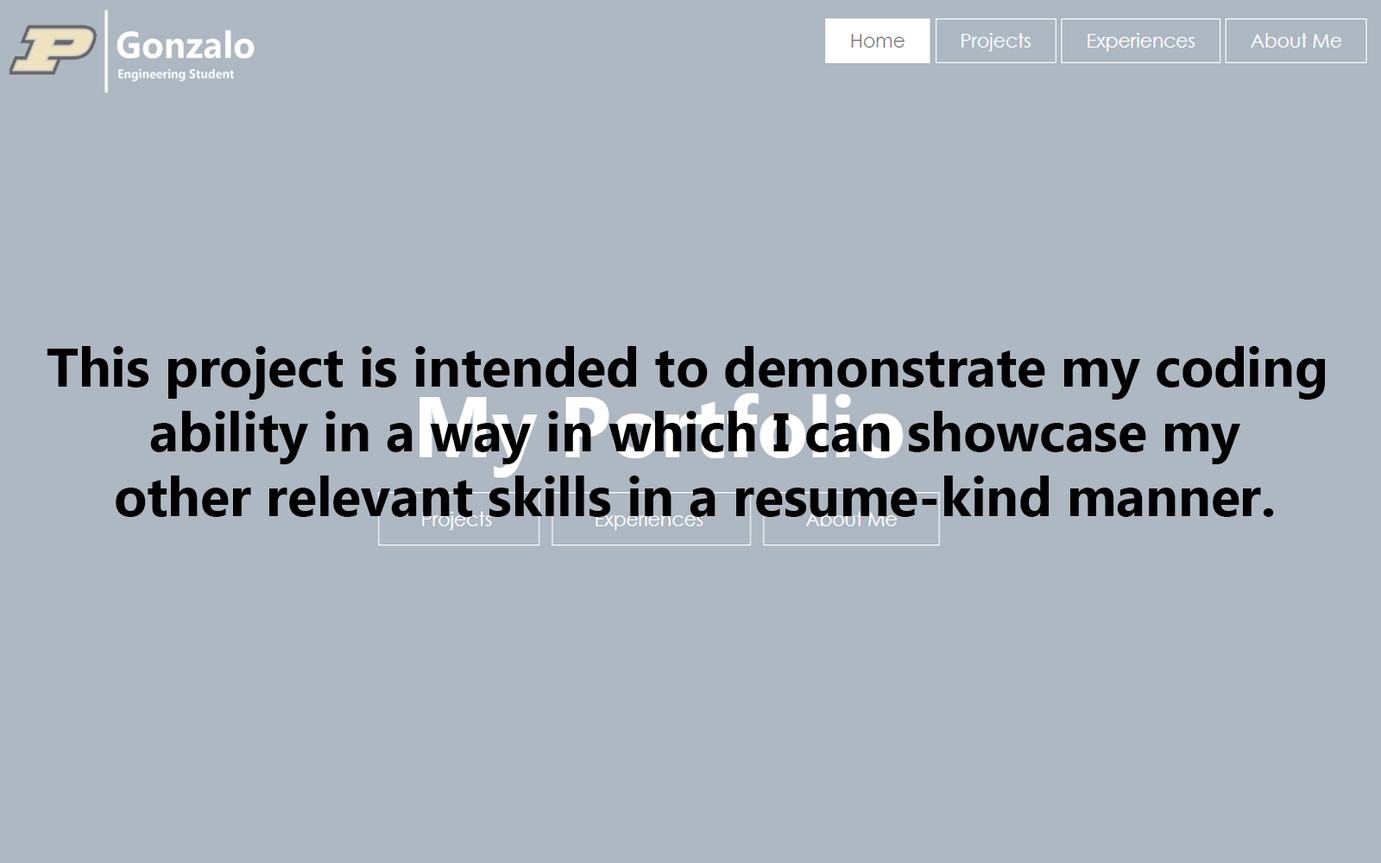
<style>
.page{position:relative;width:1381px;height:863px;background:#adb8c2}
.page>*{position:absolute;margin:0}
.t1{font:54px "MicrosoftTaiLe-Bold";color:#000000}
</style>
<div class="page">
<p class="t1" style="left:47px;top:346px;width:1278px;height:171px;text-align:center">This project is intended to demonstrate my coding<br> ability in a way in which I can showcase my<br> other relevant skills in a resume-kind manner.</p>
</div>
